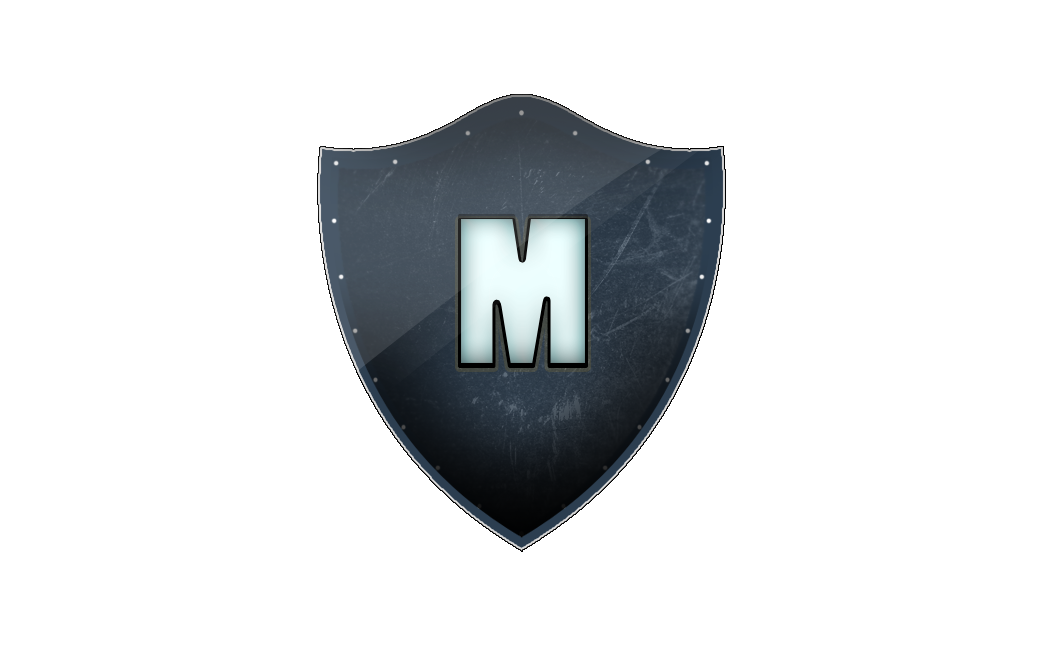
<style>
.page{position:relative;width:1041px;height:651px;background:#ffffff}
.page>*{position:absolute;margin:0}
.t1{font:200px "PoplarStd"}
</style>
<div class="page">
<p class="t1" style="left:458px;top:218px;width:130px;height:150px">M</p>
<p class="t1" style="left:458px;top:214px;width:130px;height:150px">M</p>
</div>
